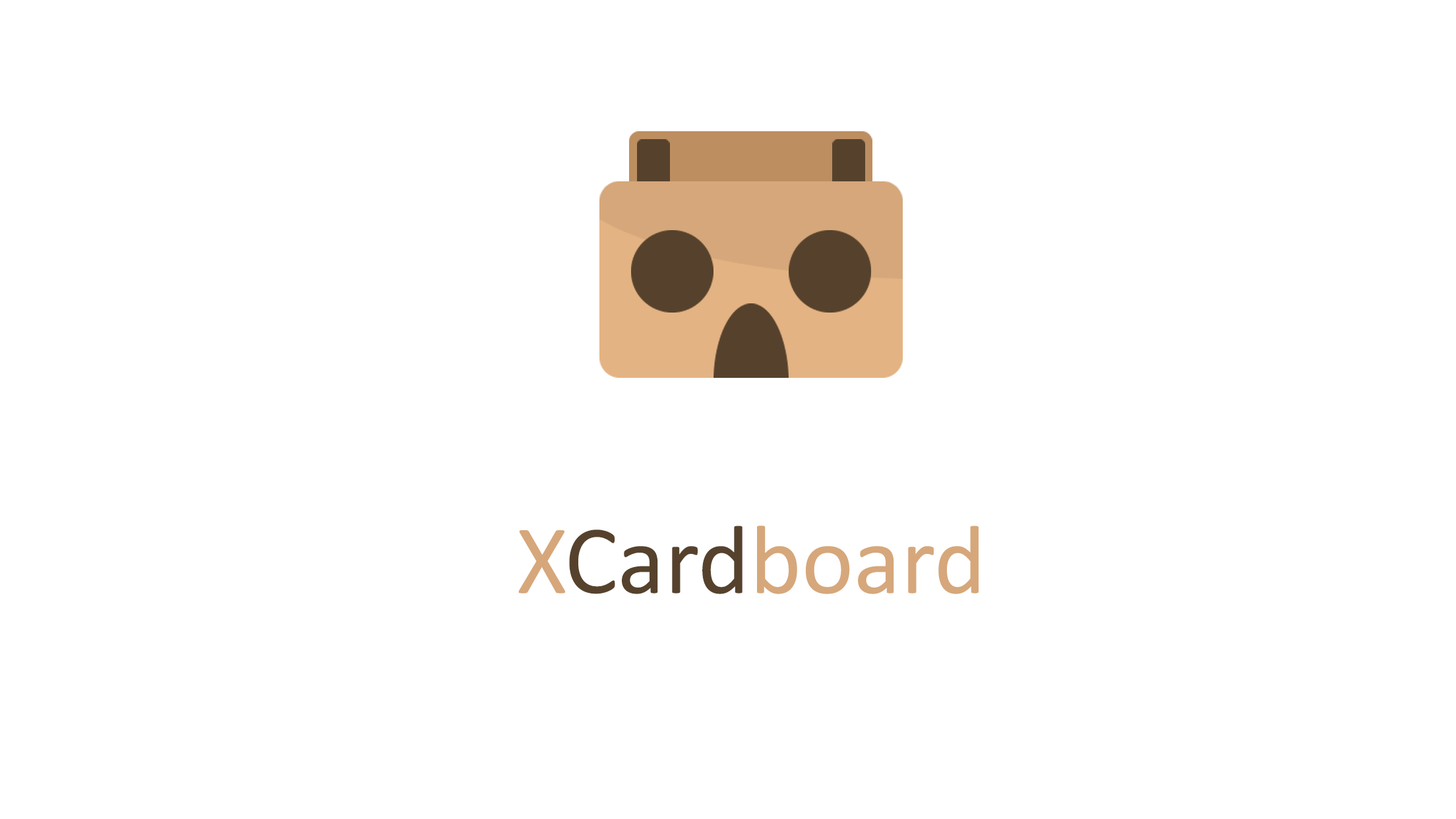
<style>
.page{position:relative;width:1456px;height:819px;background:#ffffff}
.page>*{position:absolute;margin:0}
.t1{font:98.6px "Calibri";color:#d6a77a}
.t2{font:98.6px "Calibri";color:#56422c}
</style>
<div class="page">
<p class="t1" style="left:518px;top:526px;width:461px;height:68px">X<span class="t2">Card</span>board</p>
</div>
